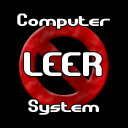
<style>
.page{position:relative;width:128px;height:128px;background:#000000}
.page>*{position:absolute;margin:0}
.t1{font:18px "GravitateBRK";color:#ffffff}
.t2{font:34px "GravitateBRK";color:#ffffff}
</style>
<div class="page">
<p class="t1" style="left:17px;top:13px;width:93px;height:16px">Computer</p>
<p class="t2" style="left:24px;top:52px;width:78px;height:24px">LEER</p>
<p class="t1" style="left:28px;top:99px;width:71px;height:16px">System</p>
</div>
